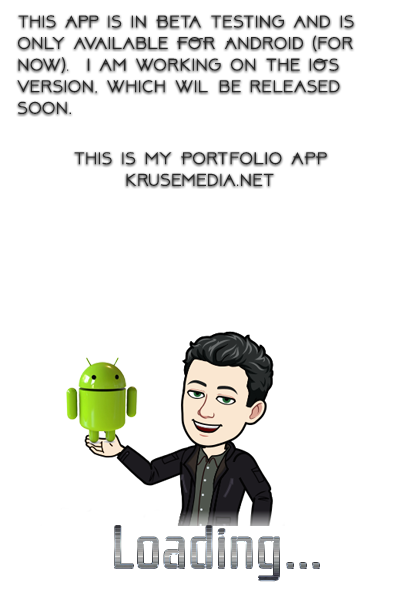
<style>
.page{position:relative;width:400px;height:600px;background:#ffffff}
.page>*{position:absolute;margin:0}
.t1{font:18px "AboveDEMO-Regular";color:#272727}
.t2{font:24px "Rationale-Regular";color:#272727}
.t3{font:60px "Rationale-Regular"}
</style>
<div class="page">
<p class="t1" style="left:17px;top:15px;width:337px;height:171px"><span class="t2"><br></span>This App is in Beta Testing and is only available FOR Android (for now).  I am working on the iOS version, which wil be released soon.<br><br>This is My Portfolio APP krusemedia.net</p>
<p class="t3" style="left:115px;top:526px;width:204px;height:55px">Loading...</p>
</div>
